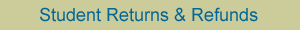
<style>
.page{position:relative;width:300px;height:30px;background:#cccc9a}
.page>*{position:absolute;margin:0}
.t1{font:18px "ArialMT";color:#016596}
</style>
<div class="page">
<p class="t1" style="left:40px;top:7px;width:218px;height:15px">Student Returns &amp; Refunds</p>
</div>
